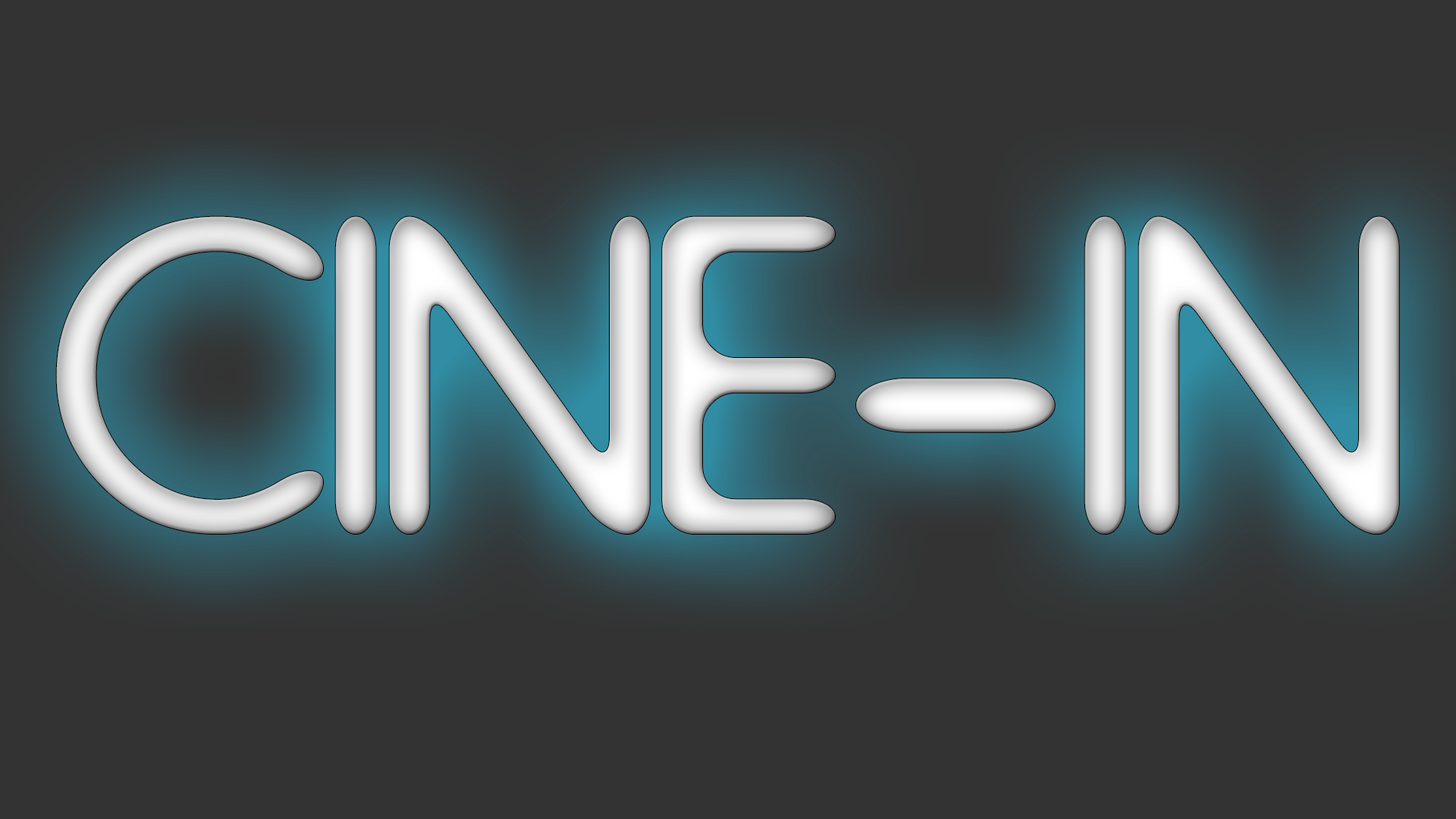
<style>
.page{position:relative;width:1456px;height:819px;background:#333333}
.page>*{position:absolute;margin:0}
.t1{font:452.9px "HotelOriental"}
</style>
<div class="page">
<p class="t1" style="left:56px;top:216px;width:1343px;height:318px">CINE-IN</p>
</div>
